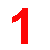
<style>
.page{position:relative;width:50px;height:50px;background:#ffffff}
.page>*{position:absolute;margin:0}
.t1{font:50px "Arial-BoldMT";color:#fd0606}
</style>
<div class="page">
<p class="t1" style="left:12px;top:8px;width:16px;height:36px">1</p>
</div>
